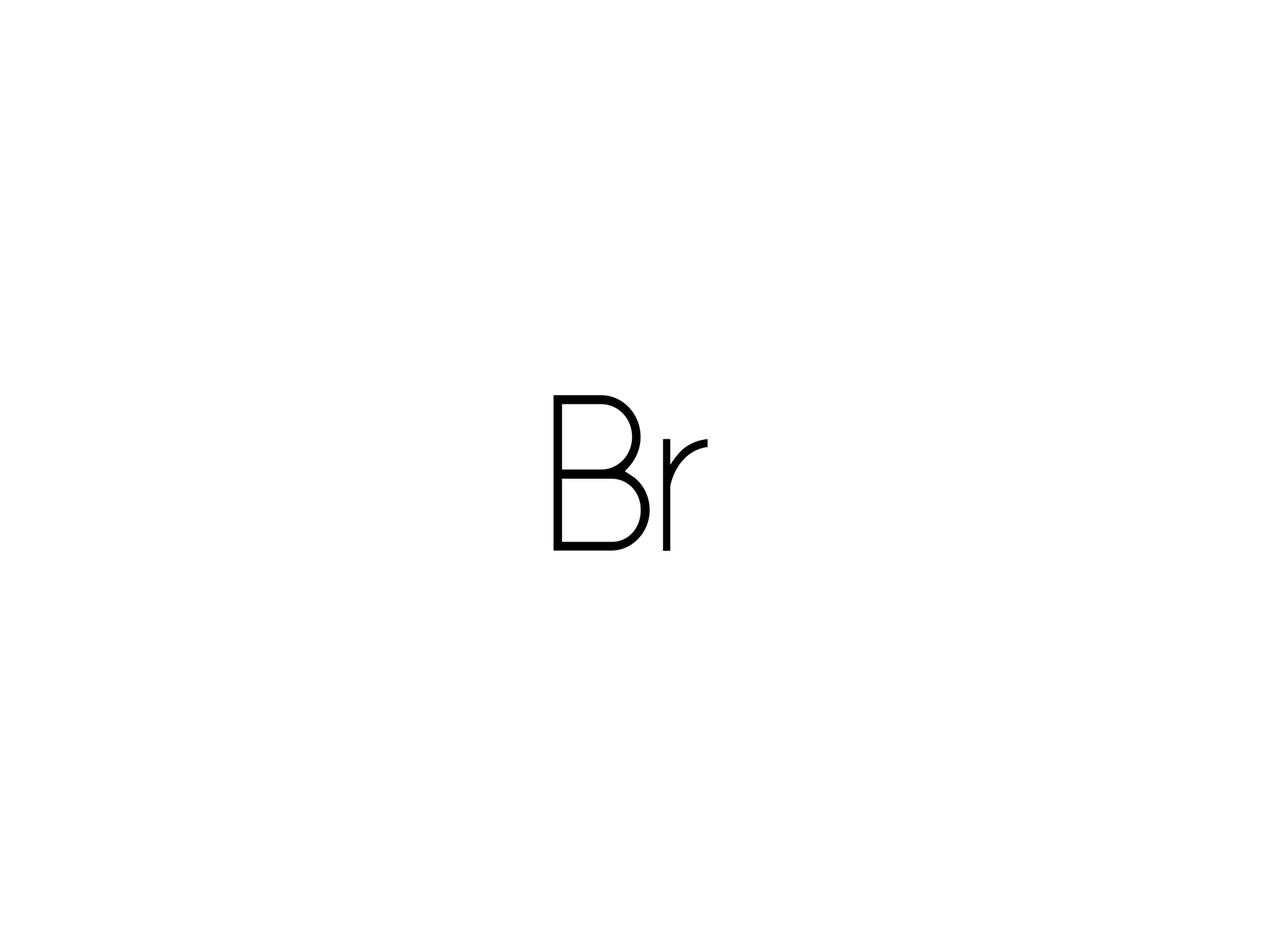
<style>
.page{position:relative;width:1261px;height:946px;background:#ffffff}
.page>*{position:absolute;margin:0}
.t1{font:222.4px "Alcubierre";color:#000000;scale:0.95 1}
</style>
<div class="page">
<p class="t1" style="left:553px;top:395px;width:155px;height:155px">Br</p>
</div>
